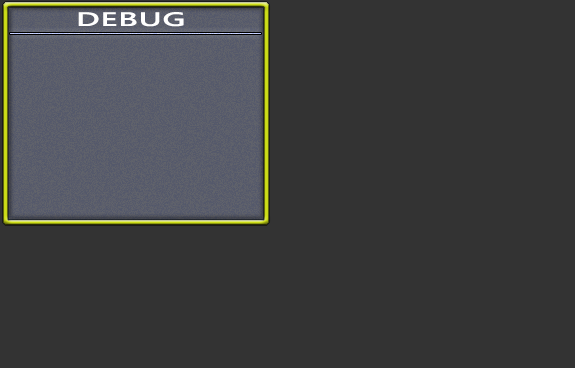
<style>
.page{position:relative;width:575px;height:368px;background:#333333}
.page>*{position:absolute;margin:0}
.t1{font:18px "MicrosoftJhengHeiBold";letter-spacing:0.02em;color:#ffffff;scale:1.71 1}
</style>
<div class="page">
<p class="t1" style="left:78px;top:12px;width:106px;height:15px">DEBUG</p>
</div>
